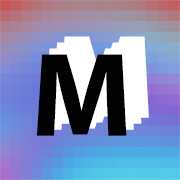
<style>
.page{position:relative;width:180px;height:180px}
.page>*{position:absolute;margin:0}
.t1{font:120px "MyriadPro-Bold";color:#020202}
.t2{font:120px "MyriadPro-Bold";color:#ffffff}
</style>
<div class="page">
<p class="t1" style="left:36px;top:54px;width:91px;height:82px">M<span class="t2">m</span></p>
</div>
